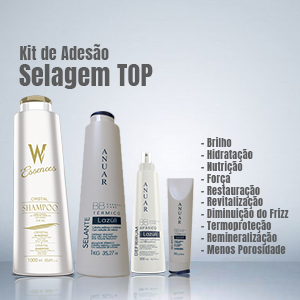
<style>
.page{position:relative;width:300px;height:300px}
.page>*{position:absolute;margin:0}
.t1{font:15.8px "Anton-Regular";letter-spacing:0.02em;color:#5c5c5c}
.t2{font:25.6px "Anton-Regular";letter-spacing:0.02em;color:#5c5c5c}
.t3{font:10.1px/11.8px "Anton-Regular";letter-spacing:0.02em;color:#5c5c5c}
</style>
<div class="page">
<p class="t1" style="left:20px;top:44px;width:89px;height:16px">Kit de Adesão</p>
<p class="t2" style="left:19px;top:64px;width:134px;height:25px">Selagem TOP</p>
<p class="t3" style="left:201px;top:137px;width:88px;height:117px">- Brilho<br>- Hidratação<br>- Nutrição<br>- Força<br>- Restauração<br>- Revitalização<br>- Diminuição do Frizz<br>- Termoproteção<br>- Remineralização<br>- Menos Porosidade</p>
</div>
